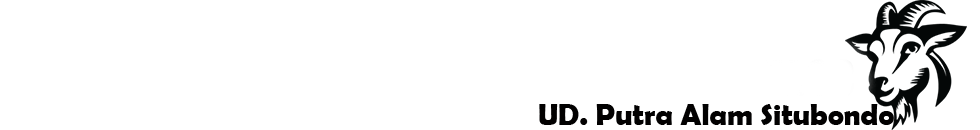
<style>
.page{position:relative;width:980px;height:130px;background:#ffffff}
.page>*{position:absolute;margin:0}
.t1{font:30px "BerlinSansFBDemi-Bold";color:#020101}
</style>
<div class="page">
<p class="t1" style="left:539px;top:104px;width:355px;height:21px">UD. Putra Alam Situbondo</p>
</div>
